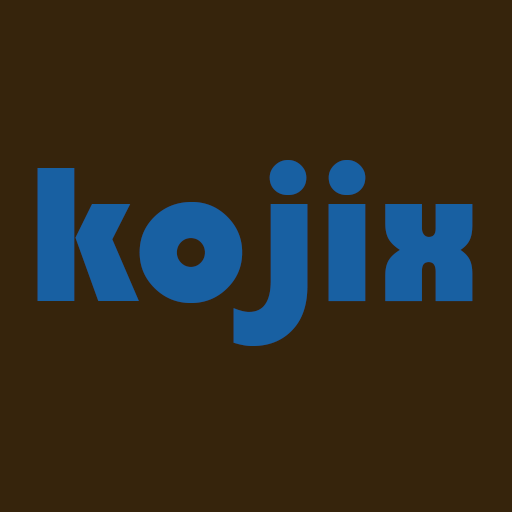
<style>
.page{position:relative;width:512px;height:512px;background:#36240c}
.page>*{position:absolute;margin:0}
.t1{font:200px "Bauhaus93";color:#1860a2}
</style>
<div class="page">
<p class="t1" style="left:37px;top:160px;width:436px;height:186px">kojix</p>
</div>
